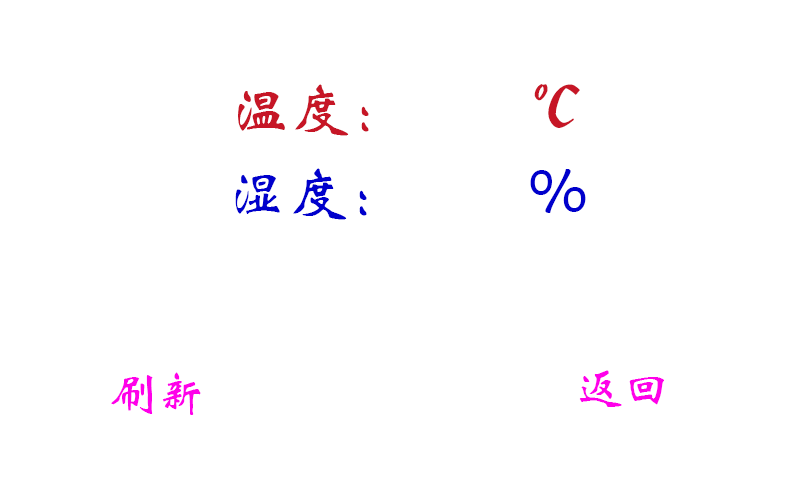
<style>
.page{position:relative;width:800px;height:480px;background:#ffffff}
.page>*{position:absolute;margin:0}
.t1{font:60px "STXinwei";color:#c61626}
.t2{font:60px "STXinwei";color:#0000cc}
.t3{font:48px "STXinwei";color:#ff00ea}
</style>
<div class="page">
<p class="t1" style="left:238px;top:84px;width:342px;height:52px">温度：        ℃</p>
<p class="t2" style="left:235px;top:168px;width:351px;height:52px">湿度：        %</p>
<p class="t3" style="left:111px;top:372px;width:90px;height:43px">刷新</p>
<p class="t3" style="left:579px;top:370px;width:85px;height:37px">返回</p>
</div>
